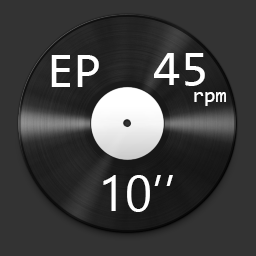
<style>
.page{position:relative;width:256px;height:256px;background:#333333}
.page>*{position:absolute;margin:0}
.t1{font:50px "Consolas";color:#ffffff}
.t2{font:20.8px "Consolas";color:#ffffff}
.t3{font:50px "Ebrima";color:#ffffff}
</style>
<div class="page">
<p class="t1" style="left:154px;top:53px;width:51px;height:33px">45</p>
<p class="t1" style="left:51px;top:55px;width:48px;height:32px">EP</p>
<p class="t2" style="left:194px;top:92px;width:32px;height:14px">rpm</p>
<p class="t3" style="left:103px;top:175px;width:70px;height:37px">10’’</p>
</div>
